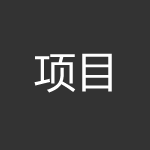
<style>
.page{position:relative;width:150px;height:150px;background:#333333}
.page>*{position:absolute;margin:0}
.t1{font:41.7px "MicrosoftYaHei";color:#ffffff}
</style>
<div class="page">
<p class="t1" style="left:34px;top:53px;width:78px;height:40px">项目</p>
</div>
